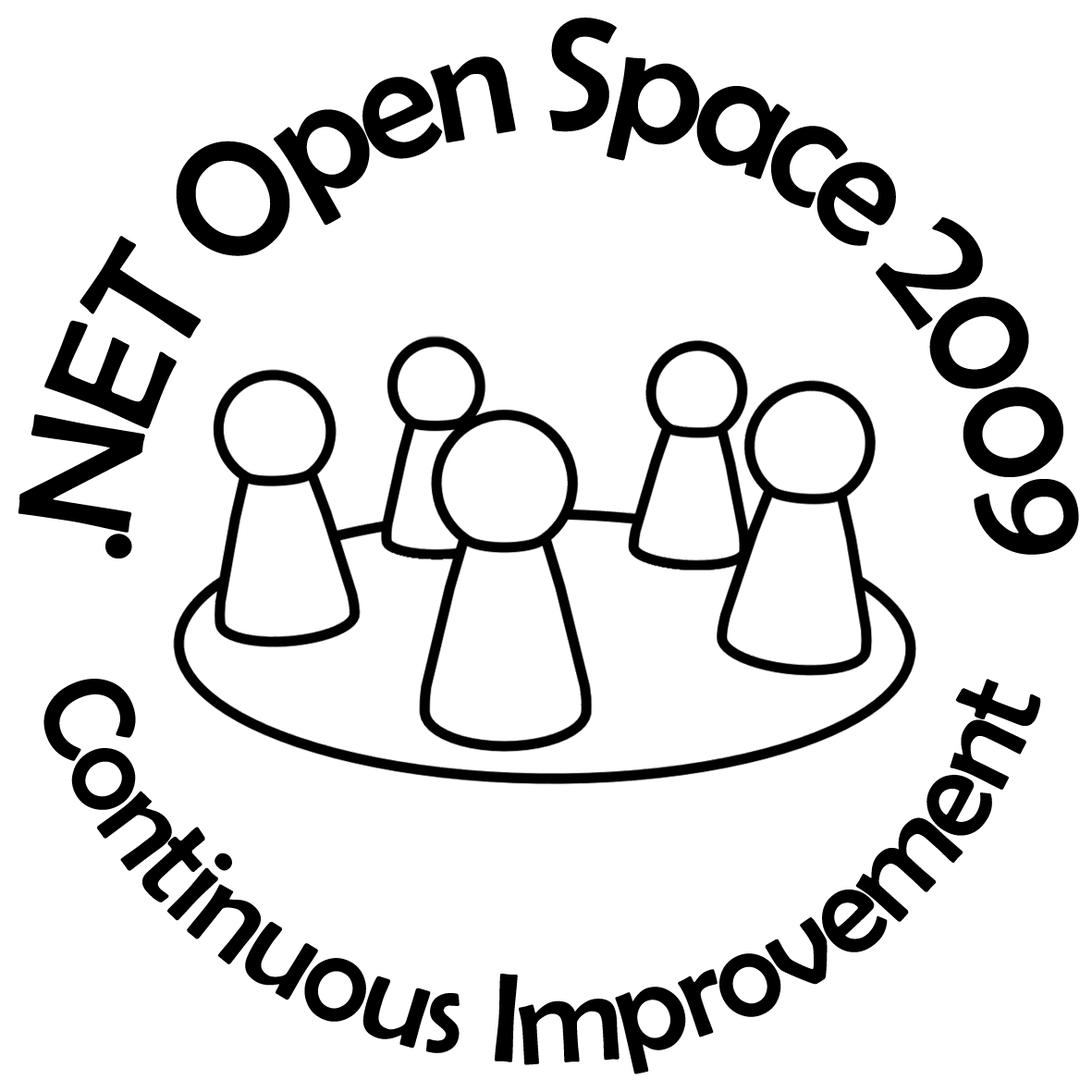
<style>
.page{position:relative;width:1092px;height:1092px;background:#ffffff}
.page>*{position:absolute;margin:0}
.t1{font:163.9px "BerlinSansFB-Reg";letter-spacing:-0.075em;color:#000000}
.t2{font:128px "BerlinSansFB-Reg";letter-spacing:-0.005em;color:#000000}
</style>
<div class="page">
<p class="t1" style="left:18px;top:18px;width:1061px;height:540px;text-align:center">.NET Open Space 2009</p>
<p class="t2" style="left:43px;top:679px;width:998px;height:395px;text-align:center">Continuous Improvement</p>
</div>
